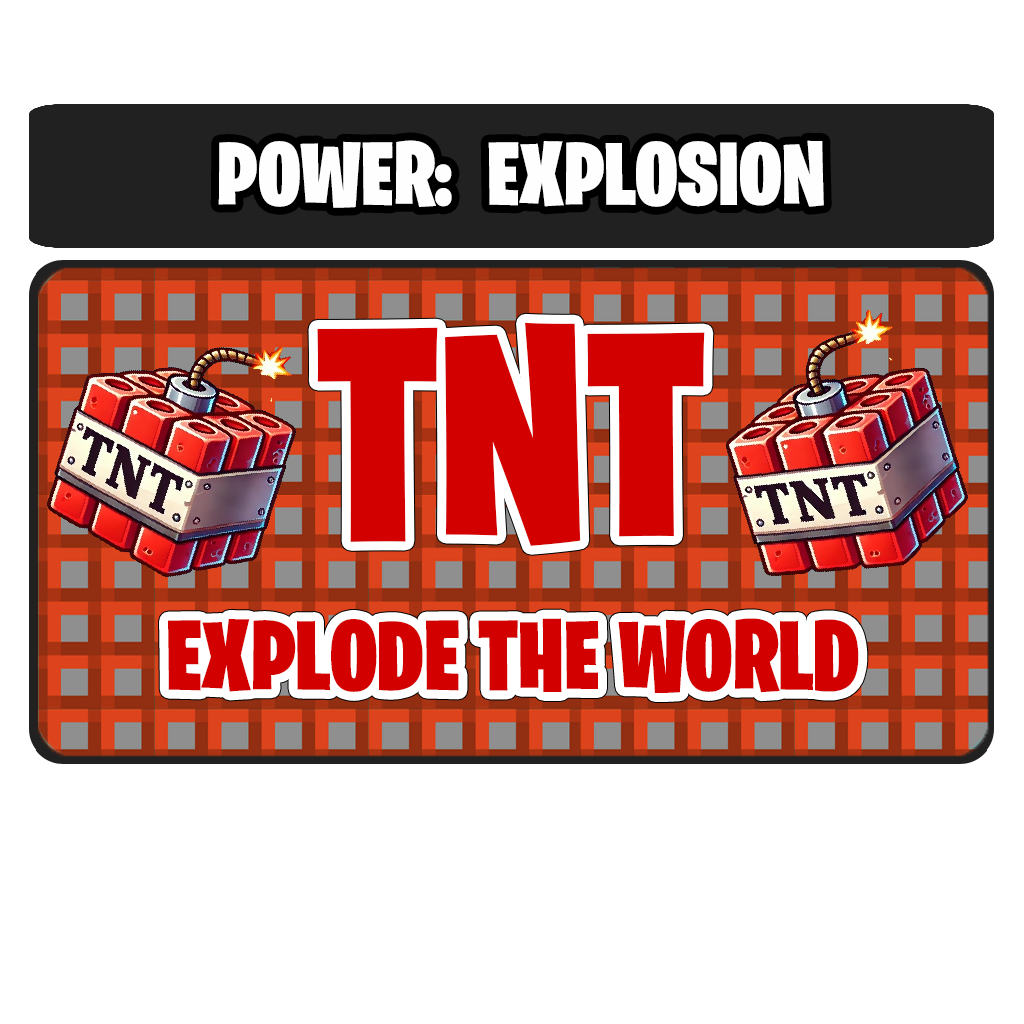
<style>
.page{position:relative;width:1024px;height:1024px;background:#ffffff}
.page>*{position:absolute;margin:0}
.t1{font:90px "BurbankBigCondensed-Black";color:#fefefe}
.t2{font:304.1px "BurbankBigCondensed-Black";color:#d30000}
.t3{font:100px "BurbankBigCondensed-Black";color:#d30000}
</style>
<div class="page">
<p class="t1" style="left:218px;top:140px;width:234px;height:68px">POWER:</p>
<p class="t1" style="left:488px;top:140px;width:336px;height:67px">EXPLOSION</p>
<p class="t2" style="left:317px;top:322px;width:388px;height:224px">TNT</p>
<p class="t3" style="left:168px;top:618px;width:691px;height:75px">EXPLODE THE WORLD</p>
</div>
